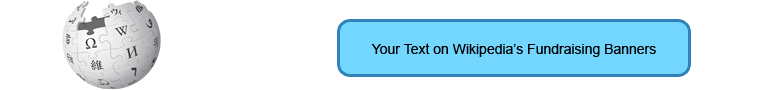
<style>
.page{position:relative;width:759px;height:90px;background:#ffffff}
.page>*{position:absolute;margin:0}
.t1{font:14px "ArialMT";color:#000000}
</style>
<div class="page">
<p class="t1" style="left:371px;top:43px;width:285px;height:14px">Your Text on Wikipedia’s Fundraising Banners</p>
</div>
